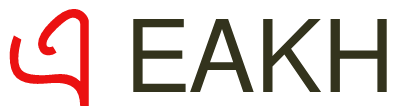
<style>
.page{position:relative;width:400px;height:112px;background:#ffffff}
.page>*{position:absolute;margin:0}
.t1{font:170px "FreeSans";color:#eb1111}
.t2{font:100px "FreeSans";color:#33331d}
</style>
<div class="page">
<p class="t1" style="left:9px;top:8px;width:80px;height:98px">এ</p>
<p class="t2" style="left:133px;top:19px;width:254px;height:73px">EAKH</p>
</div>
